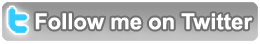
<style>
.page{position:relative;width:260px;height:44px;background:#ffffff}
.page>*{position:absolute;margin:0}
.t1{font:22px "Arial-BoldMT";color:#ffffff}
</style>
<div class="page">
<p class="t1" style="left:35px;top:13px;width:218px;height:17px">Follow me on Twitter</p>
</div>
